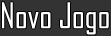
<style>
.page{position:relative;width:111px;height:36px;background:#333333}
.page>*{position:absolute;margin:0}
.t1{font:33.8px "AgencyFB-Reg";color:#ffffff}
</style>
<div class="page">
<p class="t1" style="left:2px;top:2px;width:107px;height:33px">Novo Jogo</p>
</div>
